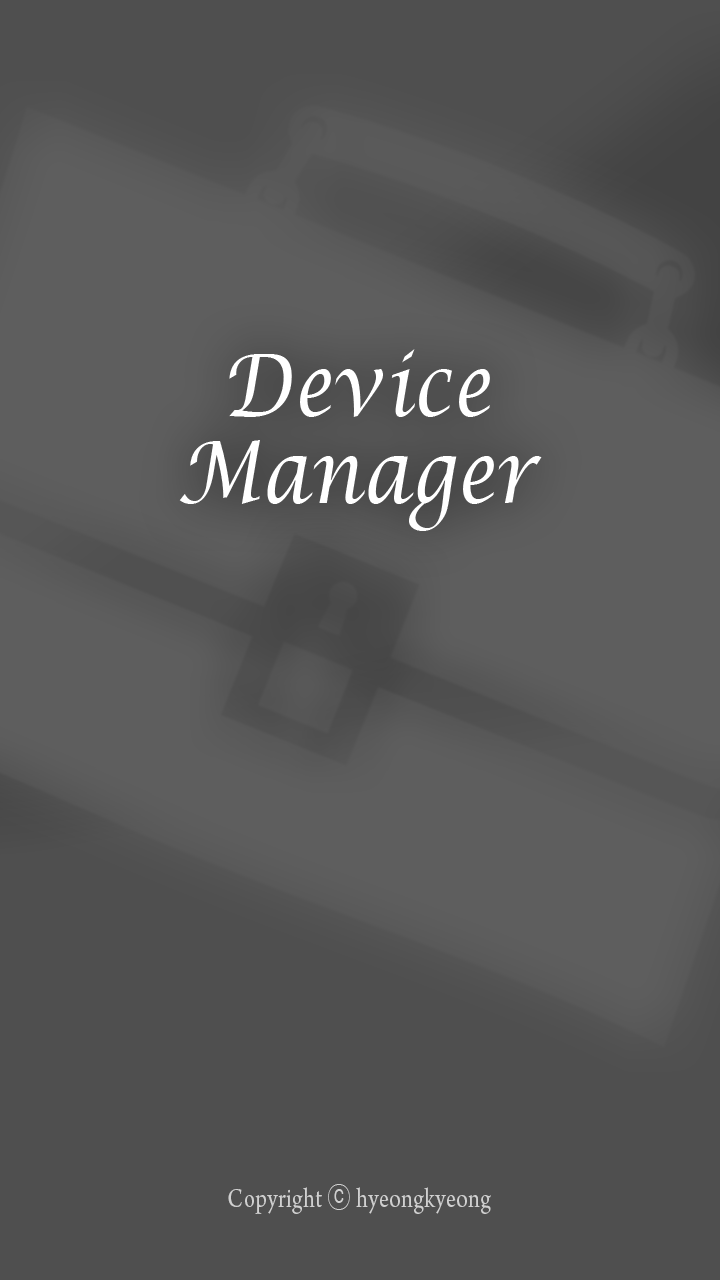
<style>
.page{position:relative;width:720px;height:1280px;background:#4f4f4f}
.page>*{position:absolute;margin:0}
.t1{font:86.4px "LucidaCalligraphy-Italic";letter-spacing:0.01em;color:#ffffff;scale:0.83 1}
.t2{font:28.8px "ArnoPro-Regular";letter-spacing:0.01em;color:#d0d0d0;scale:0.83 1}
.t3{font:28.8px "Gulim";letter-spacing:0.01em;color:#d0d0d0;scale:0.83 1}
</style>
<div class="page">
<p class="t1" style="left:179px;top:349px;width:363px;height:182px;text-align:center">Device<br>Manager</p>
<p class="t2" style="left:228px;top:1184px;width:263px;height:30px">Copyright <span class="t3">ⓒ</span> hyeongkyeong</p>
</div>
